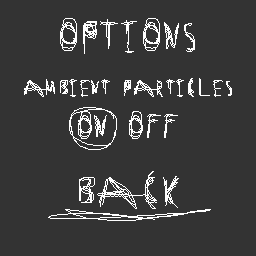
<style>
.page{position:relative;width:256px;height:256px;background:#333333}
.page>*{position:absolute;margin:0}
.t1{font:23px "Secret-Labs";color:#ffffff}
.t2{font:44px "Secret-Labs";color:#ffffff}
.t3{font:36px "Secret-Labs";color:#ffffff}
</style>
<div class="page">
<p class="t1" style="left:24px;top:18px;width:208px;height:191px;text-align:center"><span class="t2">OPTIONS<br> <br></span>AMBIENT PARTICLES <span class="t3">ON OFF<br><br></span><span class="t2">BACK</span></p>
</div>
